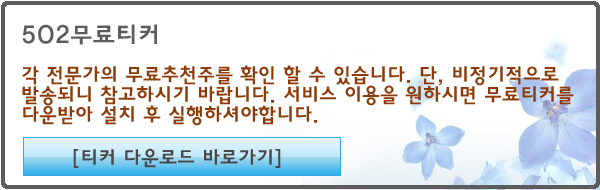
<style>
.page{position:relative;width:600px;height:190px;background:#ffffff}
.page>*{position:absolute;margin:0}
.t1{font:25px "HaanYGodic24";color:#5c5c5c}
.t2{font:20px/20px "HaanYGodic24";color:#8e3b09}
.t3{font:20px "HaanYGodic24";color:#494949}
</style>
<div class="page">
<p class="t1" style="left:22px;top:24px;width:135px;height:21px">502무료티커</p>
<p class="t2" style="left:22px;top:65px;width:552px;height:61px">각 전문가의 무료추천주를 확인 할 수 있습니다. 단, 비정기적으로 발송되니 참고하시기 바랍니다. 서비스 이용을 원하시면 무료티커를 다운받아 설치 후 실행하셔야합니다.</p>
<p class="t3" style="left:73px;top:148px;width:208px;height:20px">[티커 다운로드 바로가기]</p>
</div>
